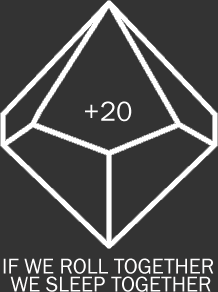
<style>
.page{position:relative;width:218px;height:292px;background:#333333}
.page>*{position:absolute;margin:0}
.t1{font:28px "FranklinGothic-Book";color:#ffffff;text-transform:uppercase}
.t2{font:22px/18px "FranklinGothic-Book";color:#fffefe;text-transform:uppercase}
</style>
<div class="page">
<p class="t1" style="left:85px;top:101px;width:47px;height:21px">+20</p>
<p class="t2" style="left:3px;top:258px;width:211px;height:34px;text-align:center">IF WE ROLL TOGETHER <br>WE SLEEP TOGETHER</p>
</div>
